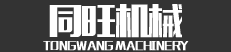
<style>
.page{position:relative;width:231px;height:52px;background:#333333}
.page>*{position:absolute;margin:0}
.t1{font:35px "MFLiHei_Noncommercial-Regular";letter-spacing:-0.046em;color:#ffffff;text-transform:uppercase}
.t2{font:10px "MFLiHei_Noncommercial-Regular";letter-spacing:-0.046em;color:#ffffff;text-transform:uppercase}
</style>
<div class="page">
<p class="t1" style="left:49px;top:4px;width:133px;height:34px">同旺机械</p>
<p class="t2" style="left:43px;top:41px;width:146px;height:10px">TONGWANG Machinery</p>
</div>
